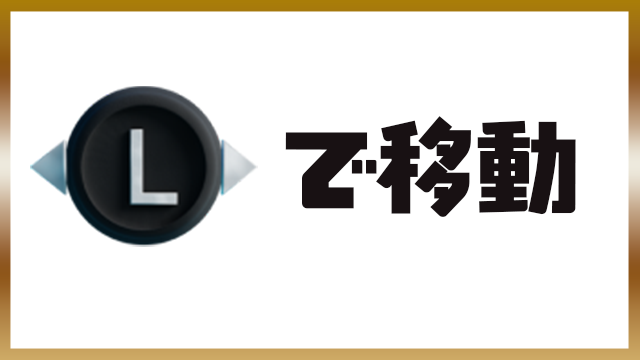
<style>
.page{position:relative;width:640px;height:360px;background:#ffffff}
.page>*{position:absolute;margin:0}
.t1{font:101.4px "ADS-strong";color:#181113}
</style>
<div class="page">
<p class="t1" style="left:285px;top:116px;width:291px;height:101px">で移動</p>
</div>
